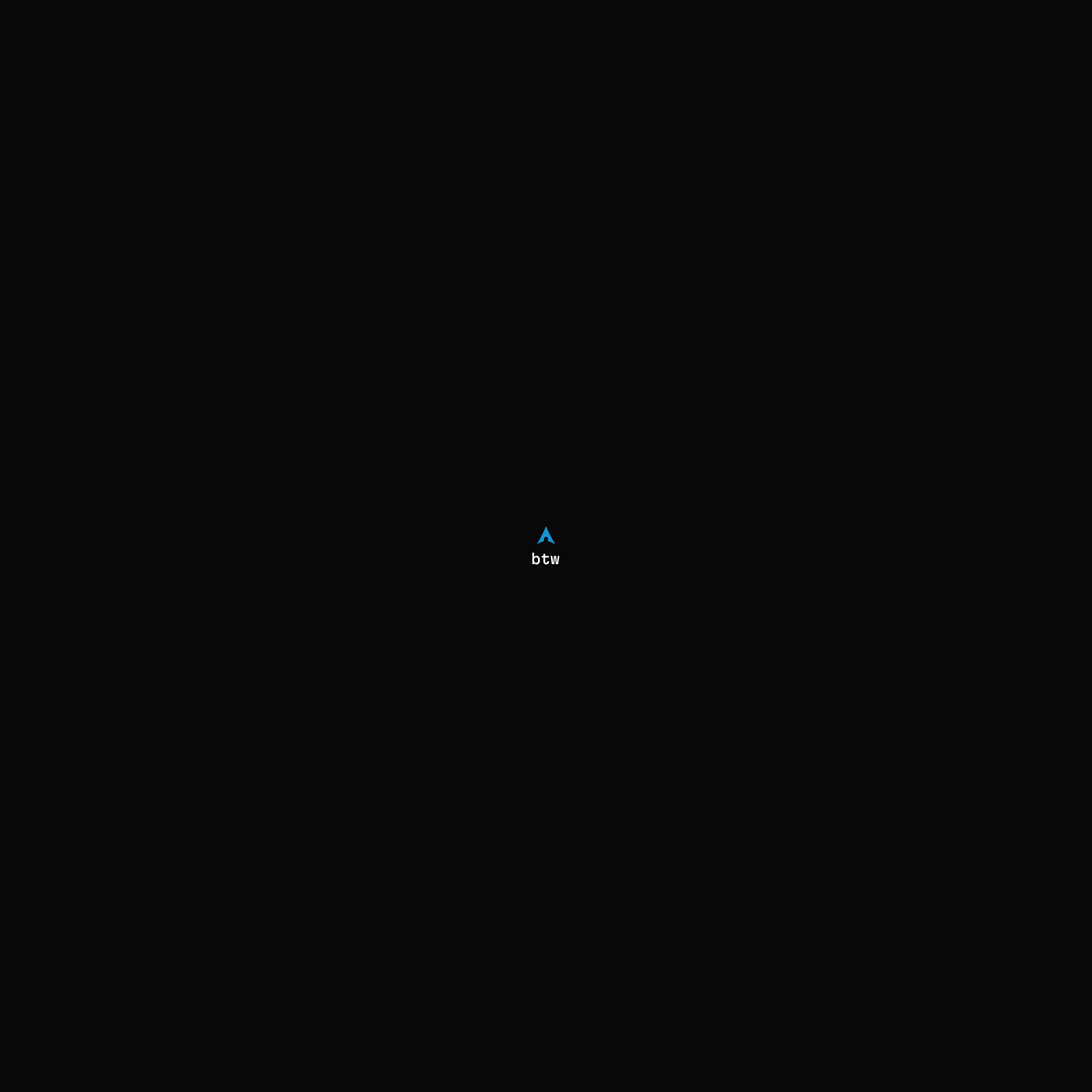
<style>
.page{position:relative;width:1092px;height:1092px;background:#080808}
.page>*{position:absolute;margin:0}
.t1{font:13.6px "MartianMonoNF-Med";color:#ffffff}
.t2{font:13.6px "MartianMonoNF-Med";color:#080808}
</style>
<div class="page">
<p class="t1" style="left:532px;top:552px;width:28px;height:13px"><span class="t2">b</span>tw</p>
</div>
